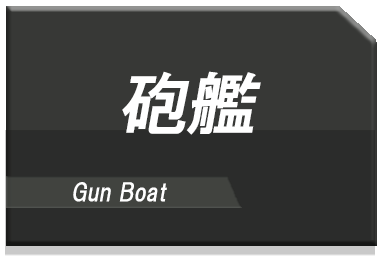
<style>
.page{position:relative;width:384px;height:256px;background:#373836}
.page>*{position:absolute;margin:0}
.t1{font:68px "HGPGothicE";color:#ffffff;font-style:italic}
.t2{font:24px "HGPGothicE";color:#ffffff;font-style:italic}
</style>
<div class="page">
<p class="t1" style="left:122px;top:71px;width:139px;height:64px">砲艦</p>
<p class="t2" style="left:73px;top:182px;width:94px;height:20px">Gun Boat</p>
</div>
